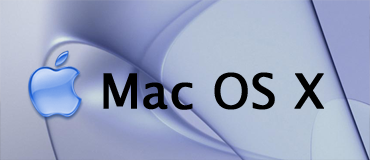
<style>
.page{position:relative;width:370px;height:160px}
.page>*{position:absolute;margin:0}
.t1{font:48px "LucidaGrande";color:#000000;font-weight:bold}
</style>
<div class="page">
<p class="t1" style="left:103px;top:72px;width:221px;height:38px">Mac OS X</p>
</div>
